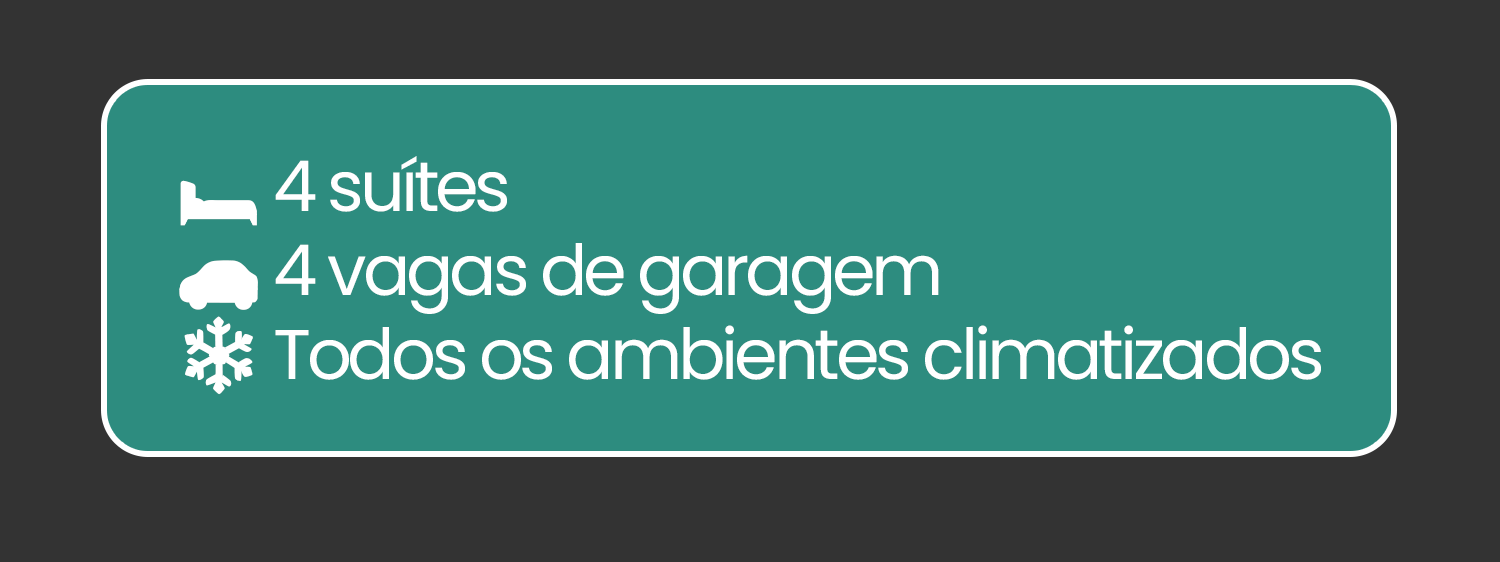
<style>
.page{position:relative;width:1500px;height:562px;background:#2d8c7f}
.page>*{position:absolute;margin:0}
.t1{font:70.2px "Poppins-Regular";letter-spacing:-0.06em;color:#ffffff}
.t2{font:70.2px "NotoColorEmoji-SVG";letter-spacing:-0.06em;color:#ffffff}
</style>
<div class="page">
<p class="t1" style="left:179px;top:156px;width:1142px;height:239px"><span class="t2">🛏️</span> 4 suítes<br><span class="t2">🚗</span> 4 vagas de garagem<br><span class="t2">❄️</span> Todos os ambientes climatizados</p>
</div>
